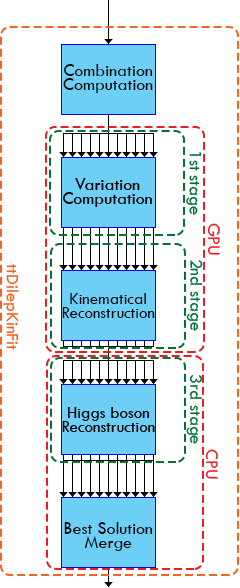
<style>
.page{position:relative;width:240px;height:588px;background:#ffffff}
.page>*{position:absolute;margin:0}
.t1{font:18px/14px "TwCenMT-Regular";color:#000000}
.t2{font:18px "TwCenMT-Regular";color:#007236}
.t3{font:18px "TwCenMT-Regular";color:#ed1c24}
.t4{font:17px/14px "TwCenMT-Regular";color:#000000}
</style>
<div class="page">
<p class="t1" style="left:63px;top:64px;width:90px;height:29px;text-align:center">Combination<br>Computation</p>
<p class="t2" style="left:186px;top:152px;width:16px;height:63px;rotate:90deg">1st stage</p>
<p class="t3" style="left:207px;top:223px;width:13px;height:32px;rotate:90deg">GPU</p>
<p class="t2" style="left:186px;top:260px;width:17px;height:71px;rotate:90deg">2nd stage</p>
<p class="t4" style="left:62px;top:293px;width:93px;height:25px;text-align:center">Kinematical<br>Reconstruction</p>
<p class="t2" style="left:186px;top:375px;width:17px;height:69px;rotate:90deg">3rd stage</p>
<p class="t3" style="left:205px;top:449px;width:13px;height:30px;rotate:90deg">CPU</p>
<p class="t1" style="left:64px;top:522px;width:89px;height:29px;text-align:center">Best Solution<br>Merge</p>
</div>
